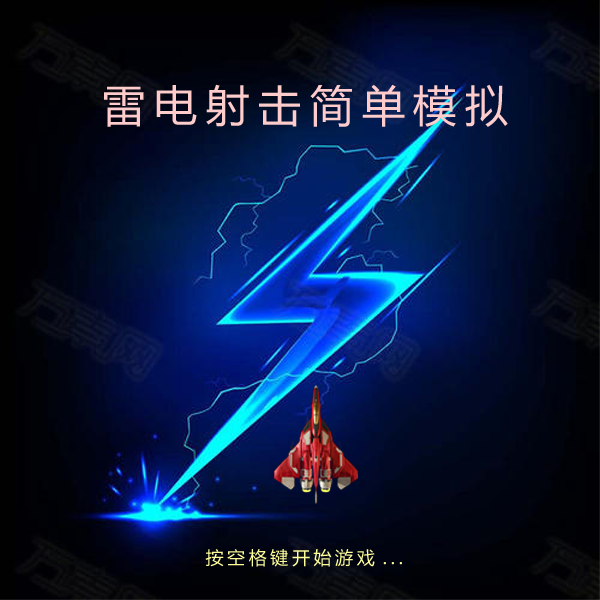
<style>
.page{position:relative;width:600px;height:600px}
.page>*{position:absolute;margin:0}
.t1{font:43.2px "MicrosoftYaHei";letter-spacing:0.2em;color:#ffcccc}
.t2{font:18px "MicrosoftYaHei";letter-spacing:0.2em;color:#ffff99}
</style>
<div class="page">
<p class="t1" style="left:104px;top:84px;width:404px;height:43px">雷电射击简单模拟</p>
<p class="t2" style="left:205px;top:549px;width:197px;height:18px">按空格键开始游戏...</p>
</div>
